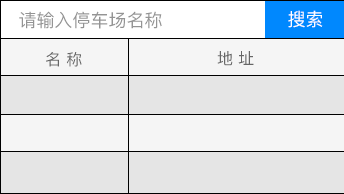
<style>
.page{position:relative;width:344px;height:194px;background:#e5e5e5}
.page>*{position:absolute;margin:0}
.t1{font:18px "PingFang-SC-Medium";color:#949494}
.t2{font:18px "PingFang-SC-Medium";color:#ffffff}
.t3{font:16px "PingFang-SC-Medium";color:#666666}
</style>
<div class="page">
<p class="t1" style="left:19px;top:11px;width:143px;height:18px">请输入停车场名称</p>
<p class="t2" style="left:288px;top:10px;width:35px;height:18px">搜索</p>
<p class="t3" style="left:46px;top:52px;width:36px;height:15px">名 称</p>
<p class="t3" style="left:217px;top:51px;width:37px;height:15px">地 址</p>
</div>
